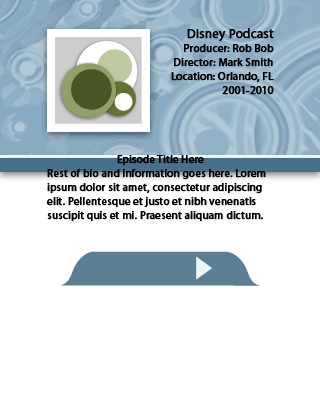
<style>
.page{position:relative;width:320px;height:400px;background:#ffffff}
.page>*{position:absolute;margin:0}
.t1{font:11px/14px "MyriadPro-Regular";color:#000000;font-weight:bold}
.t2{font:13px/14px "MyriadPro-Regular";color:#000000;font-weight:bold}
</style>
<div class="page">
<p class="t1" style="left:171px;top:28px;width:103px;height:67px;text-align:right"><span class="t2">Disney Podcast<br></span>Producer: Rob Bob<br>Director: Mark Smith<br>Location: Orlando, FL<br>2001-2010</p>
<p class="t1" style="left:47px;top:155px;width:219px;height:67px;text-align:center">Episode Title Here<br>Rest of bio and information goes here. Lorem ipsum dolor sit amet, consectetur adipiscing elit. Pellentesque et justo et nibh venenatis suscipit quis et mi. Praesent aliquam dictum.</p>
</div>
